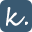
<style>
.page{position:relative;width:32px;height:32px;background:#395971}
.page>*{position:absolute;margin:0}
.t1{font:24px "SegoeScript";color:#ffffff}
</style>
<div class="page">
<p class="t1" style="left:6px;top:7px;width:22px;height:19px">k.</p>
</div>
